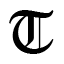
<style>
.page{position:relative;width:64px;height:64px;background:#ffffff}
.page>*{position:absolute;margin:0}
.t1{font:60px "OldEnglishTextMT";color:#000000}
</style>
<div class="page">
<p class="t1" style="left:9px;top:10px;width:45px;height:44px">T</p>
</div>
